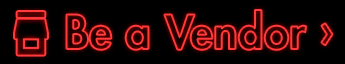
<style>
.page{position:relative;width:345px;height:64px;background:#000000}
.page>*{position:absolute;margin:0}
.t1{font:45.9px "FuturaStd-Heavy"}
</style>
<div class="page">
<p class="t1" style="left:66px;top:10px;width:267px;height:40px">Be a Vendor ›</p>
</div>
